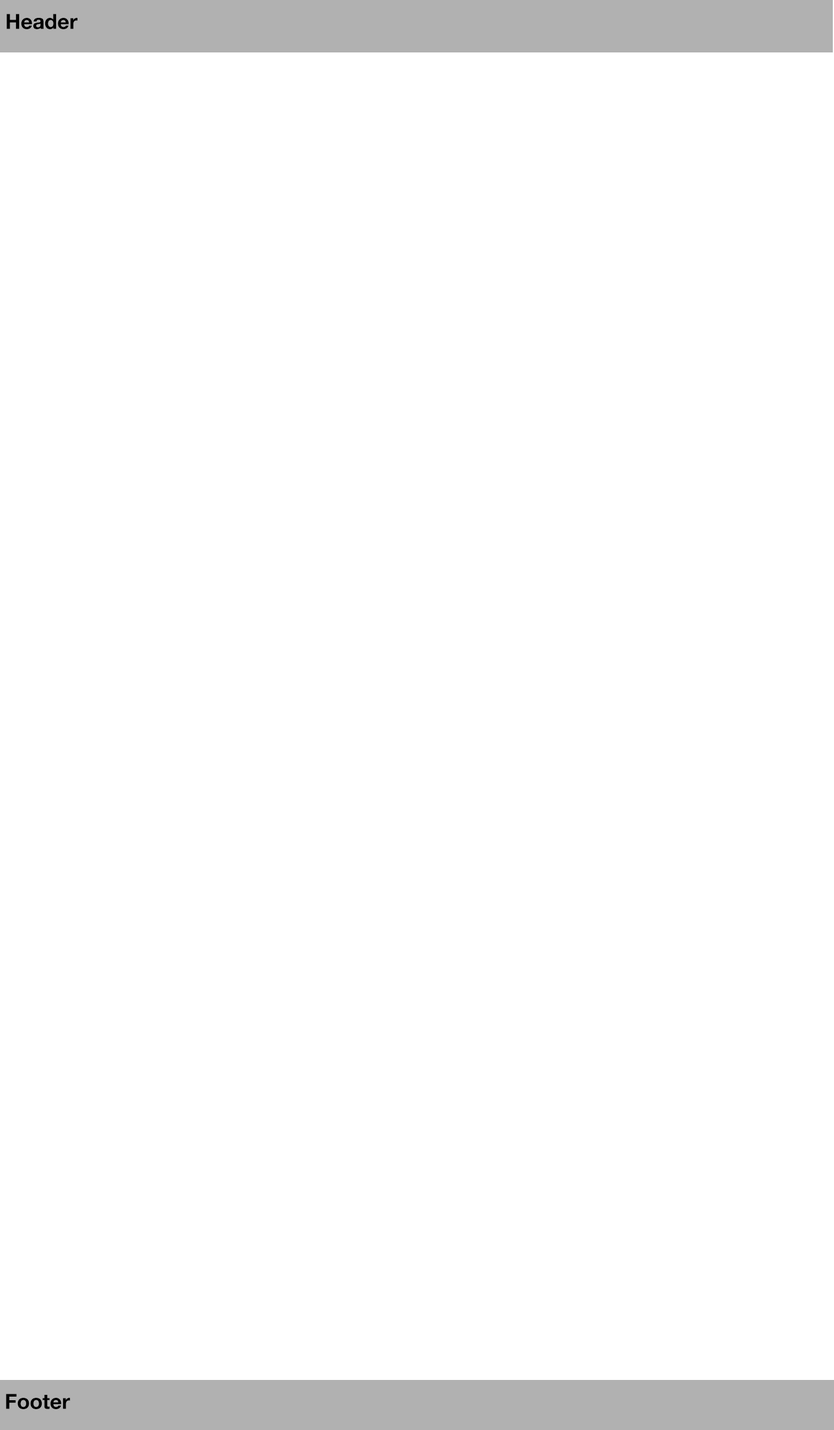
<style>
.page{position:relative;width:834px;height:1430px;background:#ffffff}
.page>*{position:absolute;margin:0}
.t1{font:20.9px "HelveticaNeue-Bold";color:#000000}
</style>
<div class="page">
<p class="t1" style="left:7px;top:14px;width:70px;height:15px">Header</p>
<p class="t1" style="left:6px;top:1393px;width:64px;height:16px">Footer</p>
</div>
